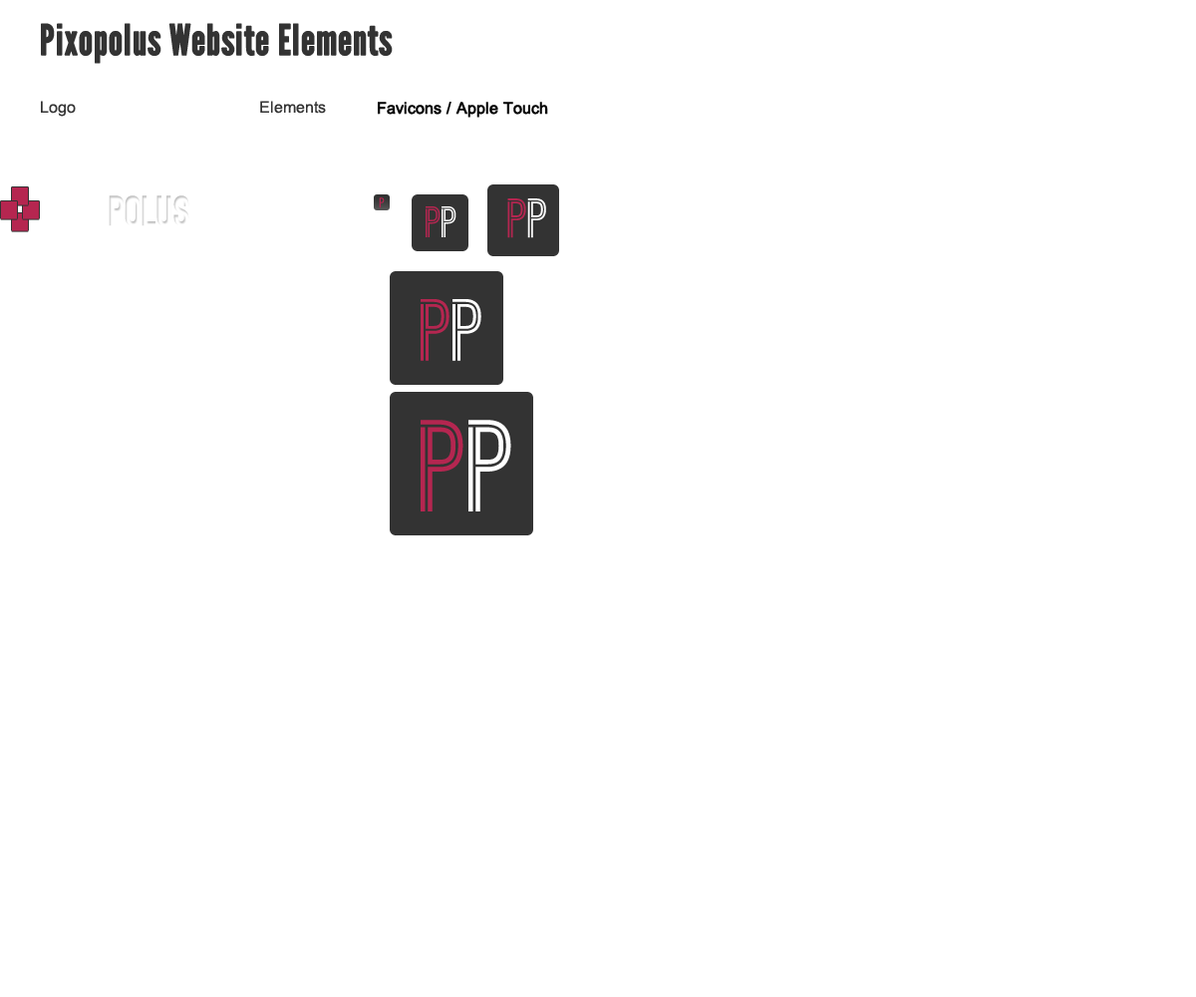
<style>
.page{position:relative;width:1196px;height:997px;background:#ffffff}
.page>*{position:absolute;margin:0}
.t1{font:41.9px "LeagueGothic";color:#333333;font-weight:bold}
.t2{font:15.9px "ArialMT";color:#333333}
.t3{font:15.9px "ArialMT";color:#000000;font-weight:bold}
.t4{font:39.9px "OstrichSans-Black";letter-spacing:-0.001em;color:#ffffff;font-weight:bold}
.t5{font:14px "OstrichSans-Medium";color:#b52650;font-weight:bold}
.t6{font:41.9px "OstrichSans-Bold";color:#b42650}
.t7{font:41.9px "OstrichSans-Bold";color:#ffffff}
.t8{font:52.9px "OstrichSans-Bold";color:#b42650}
.t9{font:52.9px "OstrichSans-Bold";color:#ffffff}
.t10{font:83.7px "OstrichSans-Bold";color:#b42650}
.t11{font:83.7px "OstrichSans-Bold";color:#ffffff}
.t12{font:123.6px "OstrichSans-Bold";color:#b42650}
.t13{font:123.6px "OstrichSans-Bold";color:#ffffff}
</style>
<div class="page">
<p class="t1" style="left:41px;top:23px;width:352px;height:41px">Pixopolus Website Elements</p>
<p class="t2" style="left:41px;top:101px;width:35px;height:16px">Logo</p>
<p class="t2" style="left:260px;top:101px;width:66px;height:13px">Elements</p>
<p class="t3" style="left:378px;top:102px;width:170px;height:16px">Favicons / Apple Touch</p>
<p class="t4" style="left:109px;top:195px;width:80px;height:31px">Polus</p>
<p class="t5" style="left:379px;top:197px;width:6px;height:11px">P</p>
<p class="t6" style="left:426px;top:206px;width:31px;height:31px">P<span class="t7">P</span></p>
<p class="t8" style="left:507px;top:198px;width:39px;height:40px">P<span class="t9">P</span></p>
<p class="t10" style="left:421px;top:299px;width:60px;height:62px">P<span class="t11">P</span></p>
<p class="t12" style="left:421px;top:420px;width:90px;height:91px">P<span class="t13">P</span></p>
</div>
